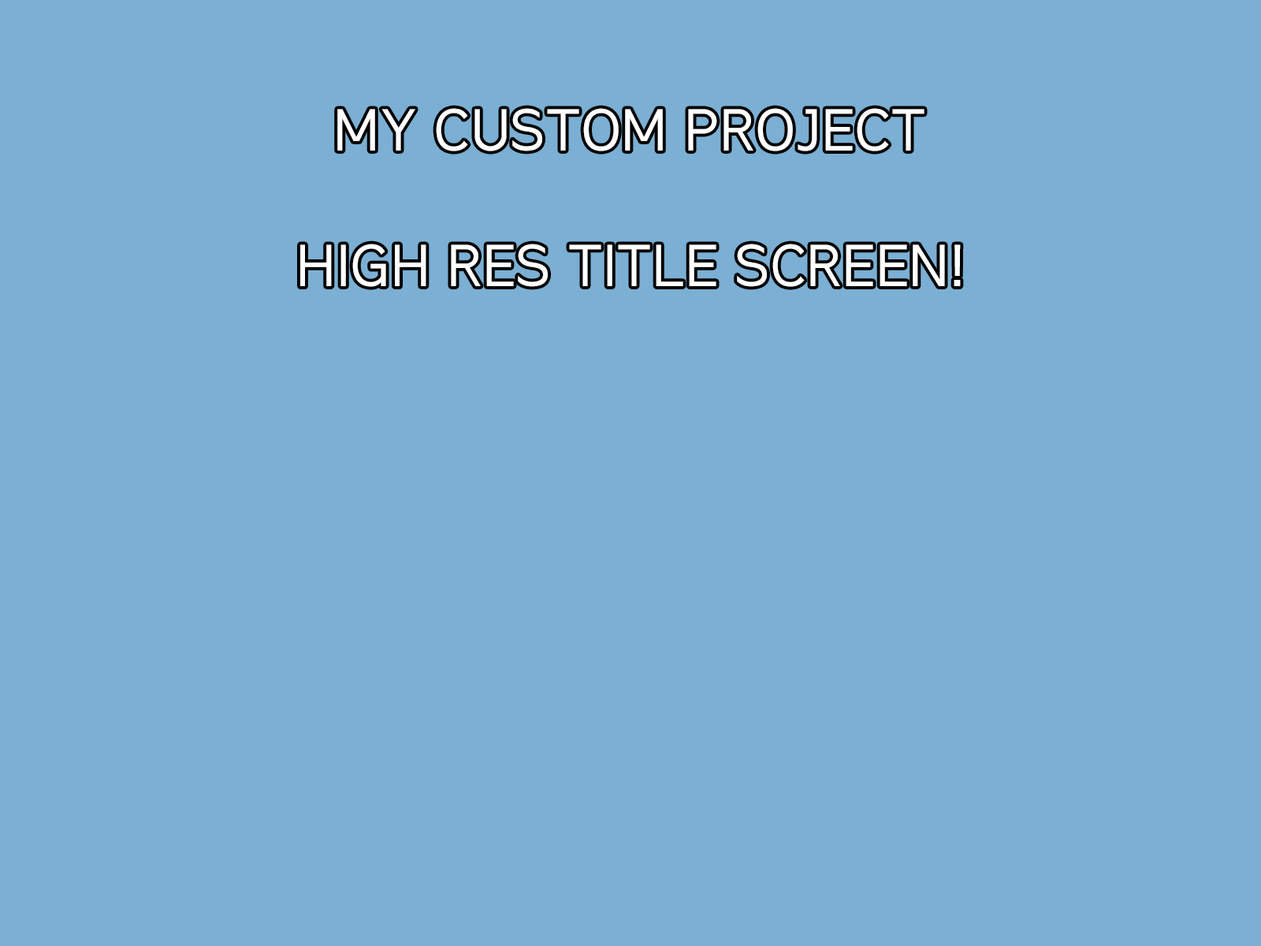
<style>
.page{position:relative;width:1261px;height:946px;background:#7bafd3}
.page>*{position:absolute;margin:0}
.t1{font:56.7px "Teknik-Regular";color:#ffffff}
</style>
<div class="page">
<p class="t1" style="left:300px;top:108px;width:661px;height:179px;text-align:center">MY CUSTOM PROJECT<br><br>HIGH RES TITLE SCREEN!</p>
</div>
